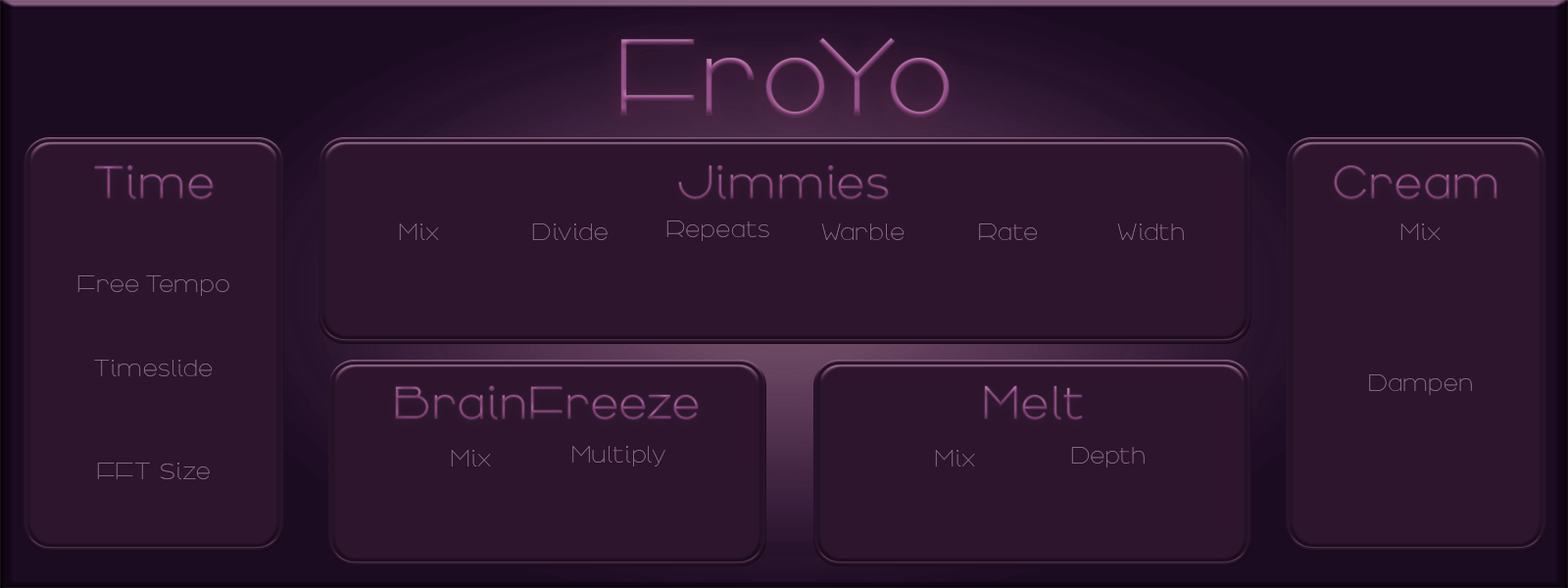
<style>
.page{position:relative;width:1568px;height:588px;background:#2c152d}
.page>*{position:absolute;margin:0}
.t1{font:116.1px "Arbotek-Light"}
.t2{font:49px "Arbotek-Light";color:#854579}
.t3{font:49px "Arbotek-Light";color:#844478}
.t4{font:25.5px "Arbotek-Thin";color:#856484}
.t5{font:49px "Arbotek-Light";color:#824478}
.t6{font:49px "Arbotek-Light";color:#86467b}
.t7{font:32.3px "Arbotek-Thin";color:#856484}
</style>
<div class="page">
<p class="t1" style="left:621px;top:38px;width:328px;height:79px">FroYo</p>
<p class="t2" style="left:94px;top:166px;width:119px;height:33px">Time</p>
<p class="t2" style="left:678px;top:166px;width:210px;height:33px">Jimmies</p>
<p class="t3" style="left:1334px;top:166px;width:162px;height:33px">Cream</p>
<p class="t4" style="left:666px;top:220px;width:103px;height:21px">Repeats</p>
<p class="t4" style="left:399px;top:223px;width:40px;height:17px">Mix</p>
<p class="t4" style="left:532px;top:223px;width:76px;height:17px">Divide</p>
<p class="t4" style="left:821px;top:223px;width:84px;height:17px">Warble</p>
<p class="t4" style="left:979px;top:223px;width:59px;height:17px">Rate</p>
<p class="t4" style="left:1117px;top:223px;width:67px;height:17px">Width</p>
<p class="t4" style="left:1400px;top:223px;width:41px;height:17px">Mix</p>
<p class="t4" style="left:77px;top:275px;width:152px;height:21px">Free Tempo</p>
<p class="t4" style="left:94px;top:360px;width:119px;height:16px">Timeslide</p>
<p class="t4" style="left:1369px;top:374px;width:103px;height:21px">Dampen</p>
<p class="t5" style="left:396px;top:386px;width:302px;height:33px">BrainFreeze</p>
<p class="t6" style="left:985px;top:386px;width:97px;height:33px">Melt</p>
<p class="t4" style="left:451px;top:450px;width:40px;height:16px">Mix</p>
<p class="t4" style="left:572px;top:446px;width:93px;height:20px">Multiply</p>
<p class="t4" style="left:935px;top:450px;width:40px;height:16px">Mix</p>
<p class="t4" style="left:1071px;top:447px;width:74px;height:20px">Depth</p>
<p class="t4" style="left:97px;top:463px;width:113px;height:16px">FFT <span class="t7">s</span>ize</p>
</div>
